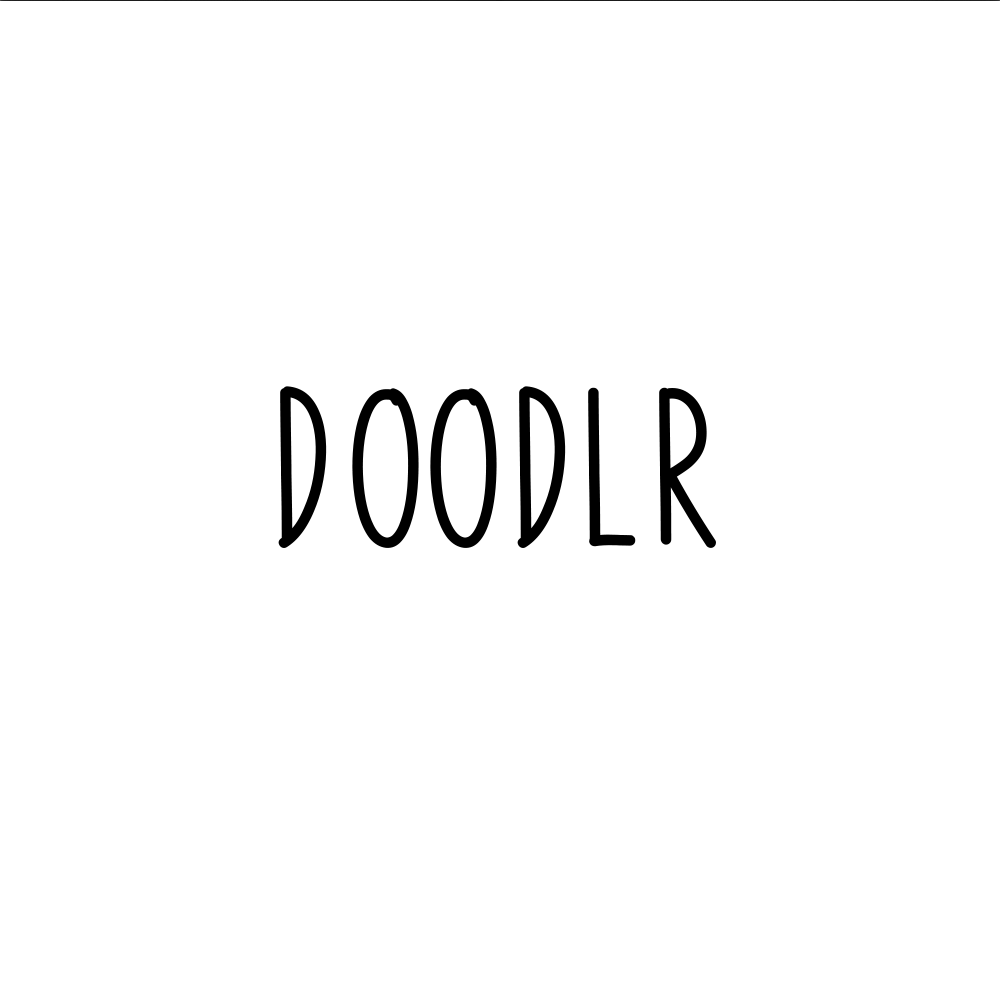
<style>
.page{position:relative;width:1000px;height:1000px;background:#ffffff}
.page>*{position:absolute;margin:0}
.t1{font:200px "MRFLemonberrySans-Medium";color:#000000}
</style>
<div class="page">
<p class="t1" style="left:278px;top:385px;width:438px;height:162px">DOODLR</p>
</div>
